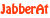
<style>
.page{position:relative;width:50px;height:18px;background:#ffffff}
.page>*{position:absolute;margin:0}
.t1{font:12px "HoboStd";color:#ff3c0f}
</style>
<div class="page">
<p class="t1" style="left:0px;top:3px;width:49px;height:11px">JabberAt</p>
</div>
